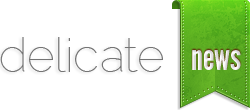
<style>
.page{position:relative;width:250px;height:110px;background:#ffffff}
.page>*{position:absolute;margin:0}
.t1{font:48px "Raleway-Thin";color:#757575}
.t2{font:36px "LeagueGothic";color:#e8e8e8}
</style>
<div class="page">
<p class="t1" style="left:0px;top:37px;width:163px;height:35px">delicate</p>
<p class="t2" style="left:192px;top:50px;width:49px;height:20px">news</p>
</div>
